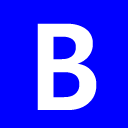
<style>
.page{position:relative;width:128px;height:128px;background:#0000ff}
.page>*{position:absolute;margin:0}
.t1{font:120px "MalgunGothicBold";letter-spacing:-0.05em;color:#ffffff;scale:0.95 1}
</style>
<div class="page">
<p class="t1" style="left:37px;top:23px;width:60px;height:87px">B</p>
</div>
